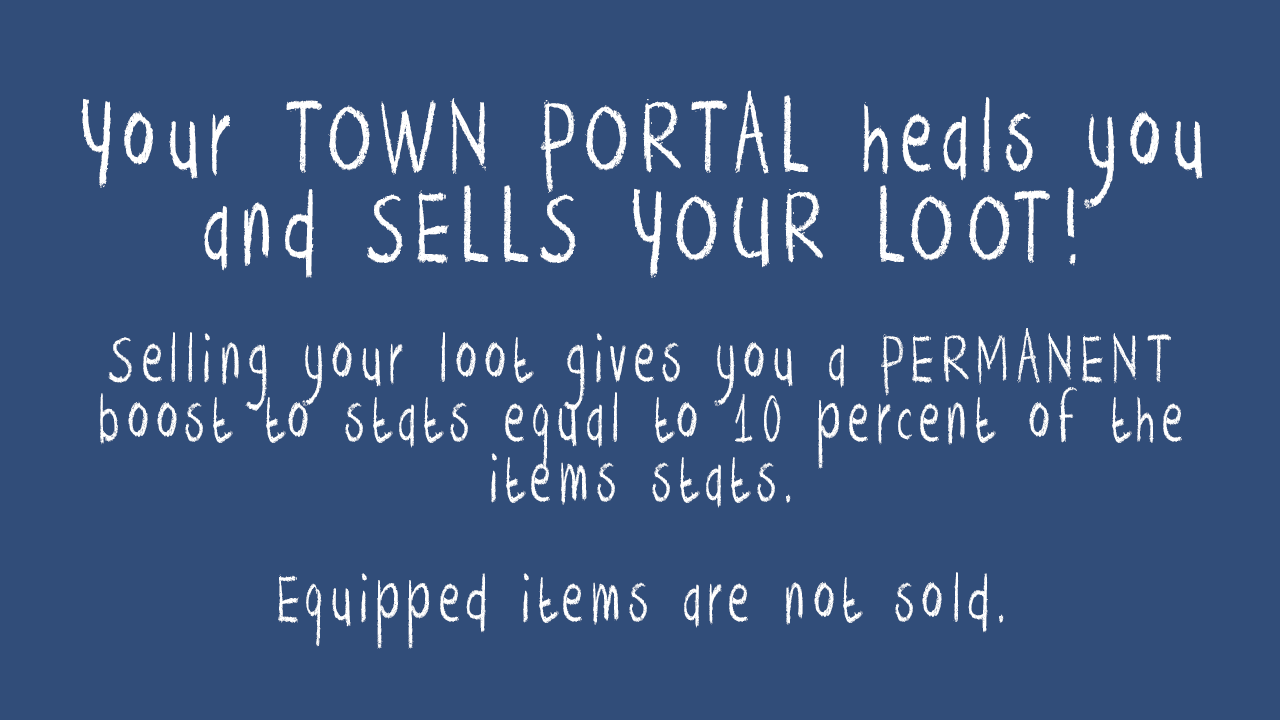
<style>
.page{position:relative;width:1280px;height:720px;background:#314d79}
.page>*{position:absolute;margin:0}
.t1{font:78.5px "DKCrayonCrumble";letter-spacing:0.159em;color:#ffffff;scale:0.64 1}
.t2{font:117.8px "DKCrayonCrumble";letter-spacing:0.159em;color:#ffffff;scale:0.64 1}
</style>
<div class="page">
<p class="t1" style="left:81px;top:90px;width:1122px;height:559px;text-align:center"><span class="t2">Your TOWN PORTAL heals you and SELLS YOUR LOOT!<br></span><br>Selling your loot gives you a PERMANENT<br>boost to stats equal to 10 percent of the items stats.<br><br>Equipped items are not sold.</p>
</div>
